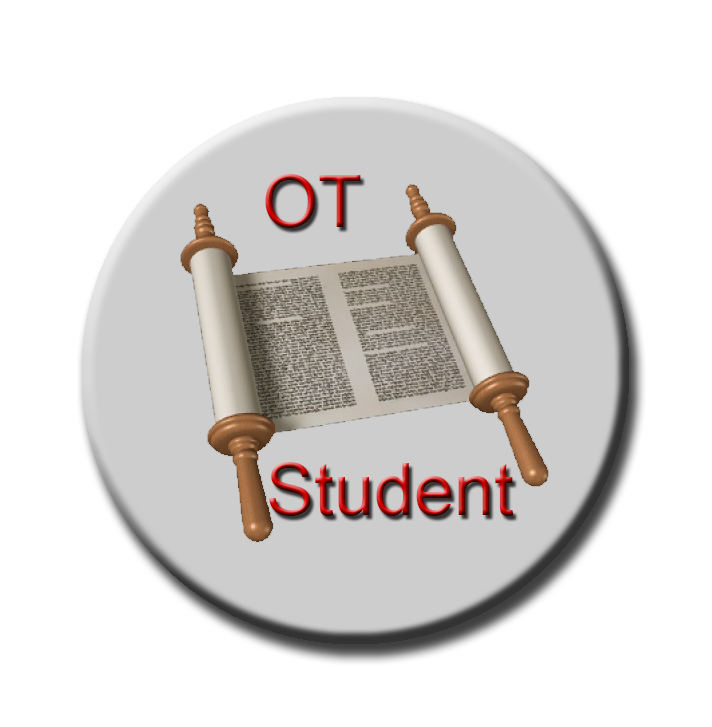
<style>
.page{position:relative;width:712px;height:727px;background:#ffffff}
.page>*{position:absolute;margin:0}
.t1{font:72px "ArialMT"}
</style>
<div class="page">
<p class="t1" style="left:265px;top:174px;width:96px;height:54px">OT</p>
<p class="t1" style="left:269px;top:462px;width:245px;height:54px">Student</p>
</div>
